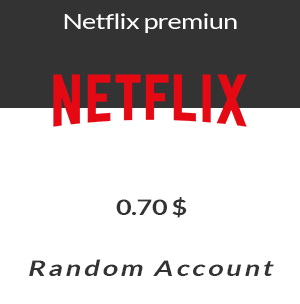
<style>
.page{position:relative;width:300px;height:304px;background:#ffffff}
.page>*{position:absolute;margin:0}
.t1{font:21.3px "Lato-Regular";letter-spacing:-0.025em;color:#ffffff;scale:1.26 1}
.t2{font:21.6px "Lato-Bold";letter-spacing:-0.025em;color:#333333;scale:1.26 1}
.t3{font:21.6px "Lato-Bold";letter-spacing:0.1em;color:#333333;font-style:italic;scale:1.26 1}
</style>
<div class="page">
<p class="t1" style="left:64px;top:13px;width:173px;height:20px">Netflix premiun</p>
<p class="t2" style="left:116px;top:197px;width:71px;height:21px">0.70 $</p>
<p class="t3" style="left:29px;top:259px;width:245px;height:17px">Random Account</p>
</div>
